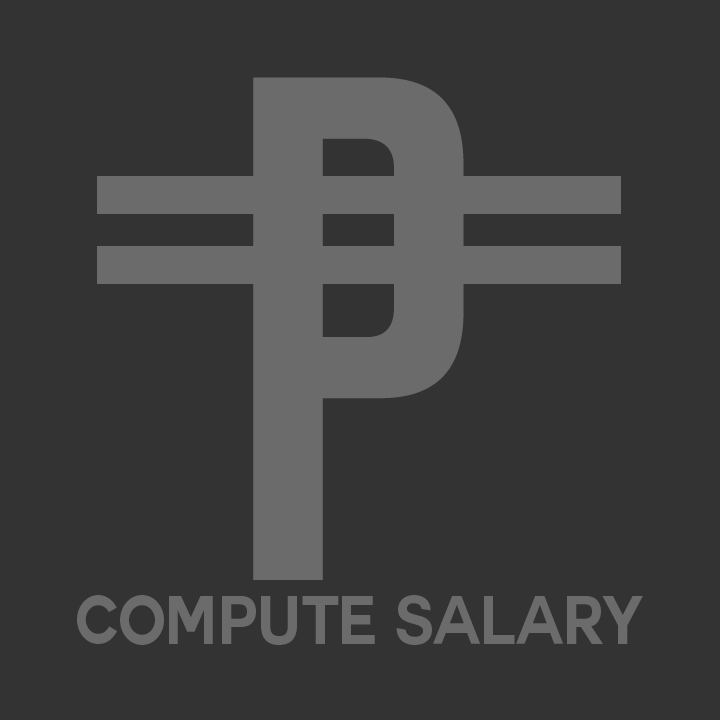
<style>
.page{position:relative;width:720px;height:720px;background:#333333}
.page>*{position:absolute;margin:0}
.t1{font:699.6px "BigNoodleTitling";letter-spacing:0.085em;color:#6b6b6b;scale:1.03 1}
.t2{font:116.3px "Couture-Bold";color:#6b6b6b;scale:0.87 1}
</style>
<div class="page">
<p class="t1" style="left:253px;top:77px;width:211px;height:503px">P</p>
<p class="t2" style="left:77px;top:595px;width:566px;height:50px">COMPUTE SALARY</p>
</div>
